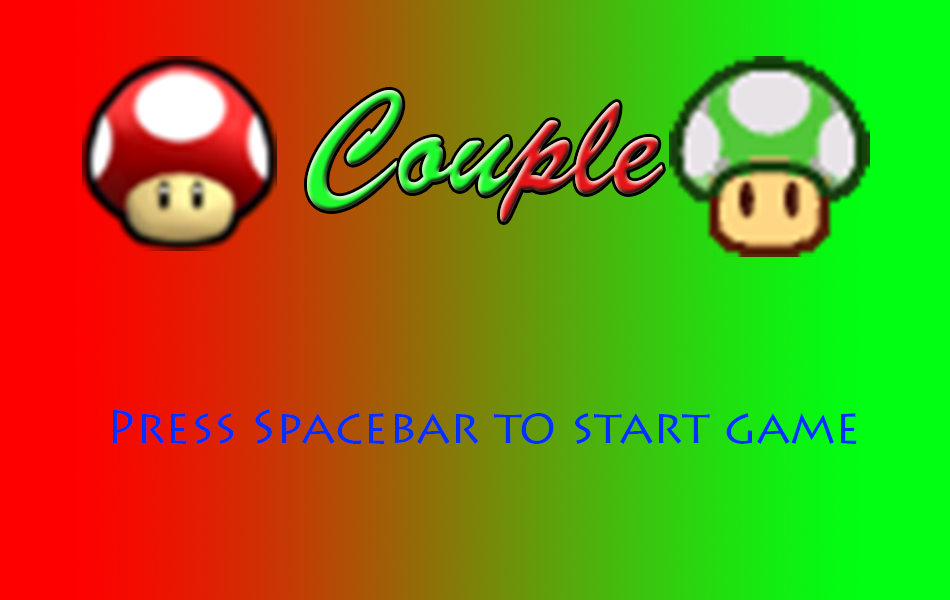
<style>
.page{position:relative;width:950px;height:600px}
.page>*{position:absolute;margin:0}
.t1{font:145.9px "BrushScriptStd";scale:0.88 1}
.t2{font:48px "LithosPro-Regular";color:#0030ff}
</style>
<div class="page">
<p class="t1" style="left:307px;top:89px;width:356px;height:134px">Couple</p>
<p class="t2" style="left:112px;top:409px;width:745px;height:35px">Press Spacebar to start game</p>
</div>
